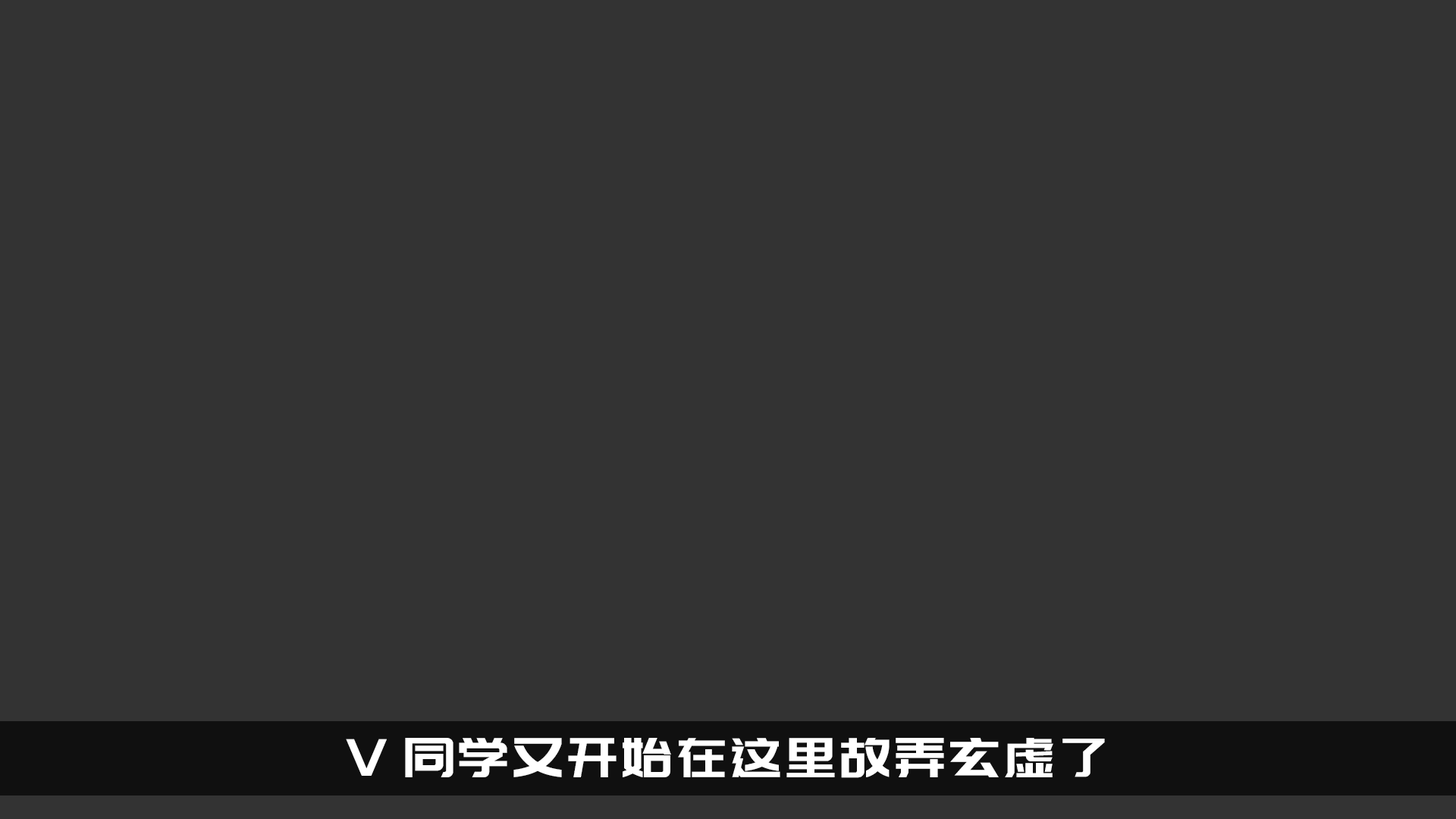
<style>
.page{position:relative;width:1456px;height:819px;background:#333333}
.page>*{position:absolute;margin:0}
.t1{font:54.6px "PangMenZhengDao-3";color:#ffffff}
</style>
<div class="page">
<p class="t1" style="left:346px;top:738px;width:759px;height:40px">V同学又开始在这里故弄玄虚了</p>
</div>
